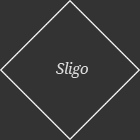
<style>
.page{position:relative;width:140px;height:140px;background:#333333}
.page>*{position:absolute;margin:0}
.t1{font:14.8px "DroidSerif-Italic";color:#dcdcdc}
</style>
<div class="page">
<p class="t1" style="left:56px;top:62px;width:32px;height:16px">Sligo</p>
</div>
